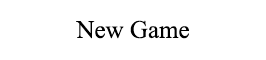
<style>
.page{position:relative;width:266px;height:60px;background:#ffffff}
.page>*{position:absolute;margin:0}
.t1{font:25px "TimesNewRomanPSMT";color:#000000}
</style>
<div class="page">
<p class="t1" style="left:76px;top:20px;width:113px;height:19px">New Game</p>
</div>
